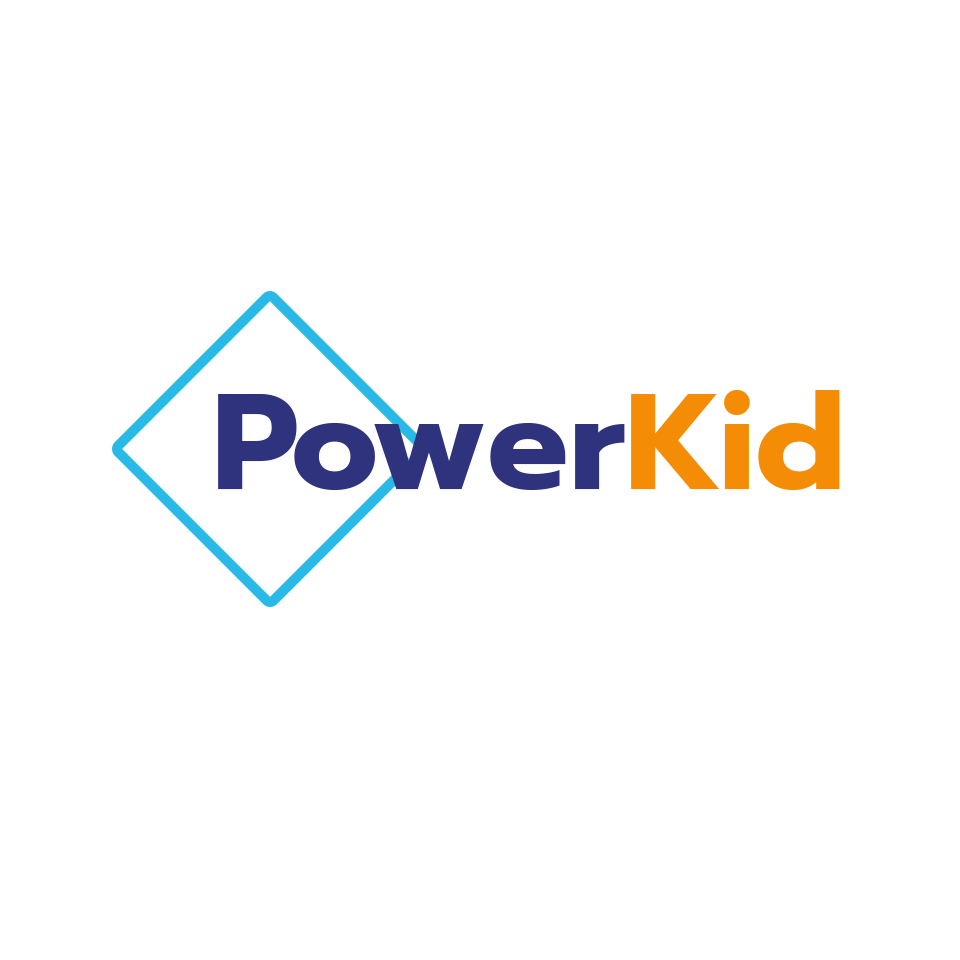
<style>
.page{position:relative;width:960px;height:960px;background:#ffffff}
.page>*{position:absolute;margin:0}
.t1{font:136px "Prompt-Bold";color:#2f327d}
.t2{font:136px "Prompt-Bold";color:#f48c06}
</style>
<div class="page">
<p class="t1" style="left:218px;top:390px;width:622px;height:100px">Power<span class="t2">Kid</span></p>
</div>
